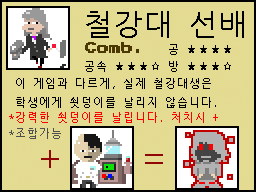
<style>
.page{position:relative;width:256px;height:192px;background:#e4db92}
.page>*{position:absolute;margin:0}
.t1{font:30px "NanumGothicCoding";color:#000000}
.t2{font:12px "PressStart2P";color:#4b3800}
.t3{font:11px "NanumGothicCoding";color:#000000}
.t4{font:11px "NanumGothicCoding";color:#ff0000}
.t5{font:11px "NanumGothicCoding";color:#4f4f4f}
.t6{font:36px "NanumGothicCoding";color:#900707}
</style>
<div class="page">
<p class="t1" style="left:86px;top:11px;width:158px;height:27px">철강대 선배</p>
<p class="t2" style="left:85px;top:42px;width:54px;height:11px">Comb.</p>
<p class="t3" style="left:169px;top:44px;width:62px;height:11px">공 ★★★★</p>
<p class="t3" style="left:85px;top:61px;width:146px;height:11px">공속 ★★★☆ 방 ★★★☆</p>
<p class="t3" style="left:16px;top:78px;width:200px;height:30px">이 게임과 다르게, 실제 철강대생은<br>학생에게 쇳덩이를 날리지 않습니다.</p>
<p class="t4" style="left:9px;top:112px;width:209px;height:11px">*강력한 쇳덩이를 날립니다. 처치시 +</p>
<p class="t5" style="left:9px;top:128px;width:52px;height:11px">*조합가능</p>
<p class="t6" style="left:41px;top:150px;width:18px;height:18px">+</p>
<p class="t6" style="left:145px;top:154px;width:18px;height:10px">=</p>
</div>
